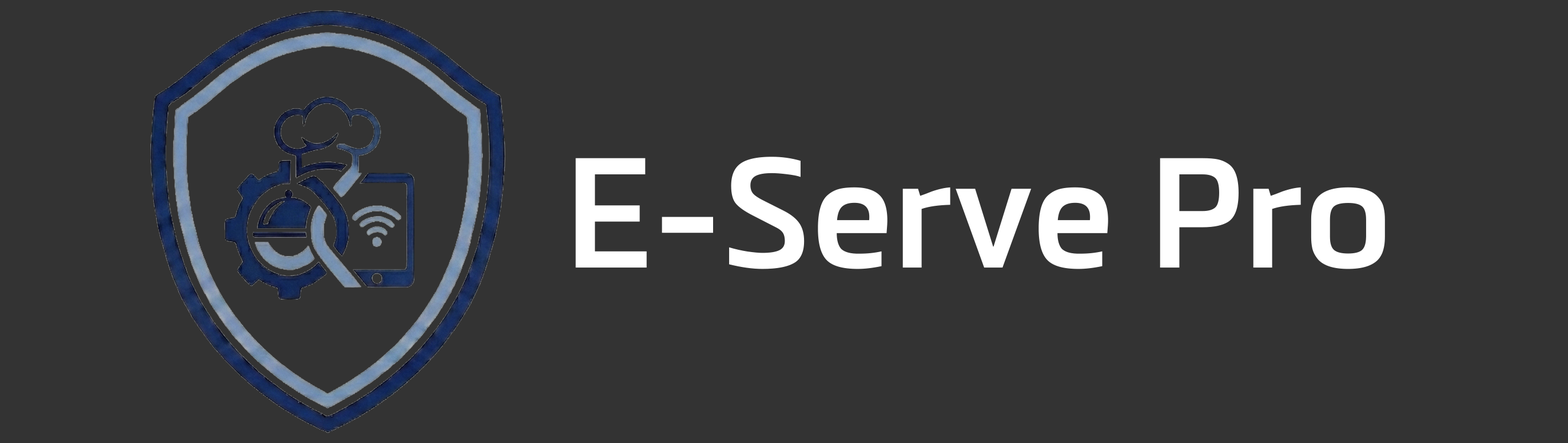
<style>
.page{position:relative;width:1568px;height:443px;background:#333333}
.page>*{position:absolute;margin:0}
.t1{font:153.5px "MetronicPro-SemiBold";color:#ffffff}
</style>
<div class="page">
<p class="t1" style="left:575px;top:157px;width:810px;height:112px">E-Serve Pro</p>
</div>
